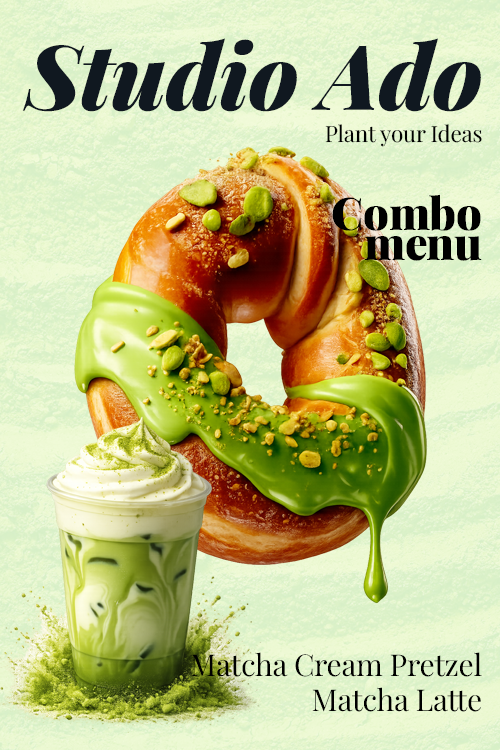
<style>
.page{position:relative;width:500px;height:750px}
.page>*{position:absolute;margin:0}
.t1{font:90px "PlayfairDisplayItalic-BlackItalic";letter-spacing:-0.01em;color:#101820}
.t2{font:22.5px "PlayfairDisplay-Regular";letter-spacing:-0.01em;color:#000000}
.t3{font:45px/30px "PlayfairDisplayRoman-Black";letter-spacing:-0.01em;color:#000000}
.t4{font:30px/35px "PlayfairDisplay-Regular";letter-spacing:-0.01em;color:#000000}
</style>
<div class="page">
<p class="t1" style="left:22px;top:38px;width:459px;height:74px">Studio Ado</p>
<p class="t2" style="left:325px;top:124px;width:157px;height:23px">Plant your Ideas</p>
<p class="t3" style="left:332px;top:194px;width:150px;height:67px;text-align:right">Combo<br>menu</p>
<p class="t4" style="left:191px;top:652px;width:291px;height:60px;text-align:right">Matcha Cream Pretzel<br>Matcha Latte</p>
</div>
